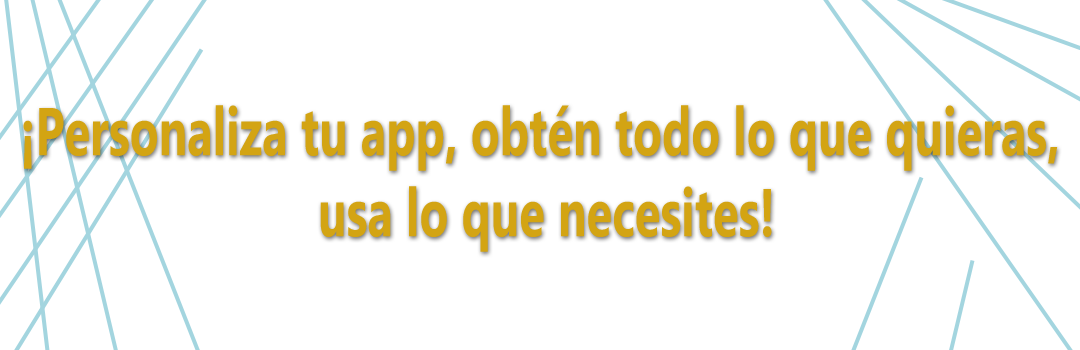
<style>
.page{position:relative;width:1080px;height:350px;background:#ffffff}
.page>*{position:absolute;margin:0}
.t1{font:67.5px "MicrosoftNewTaiLue-Bold";color:#d3a413;scale:0.7 1}
</style>
<div class="page">
<p class="t1" style="left:23px;top:105px;width:1035px;height:147px;text-align:center">¡Personaliza tu app, obtén todo lo que quieras,<br> usa lo que necesites!</p>
</div>
